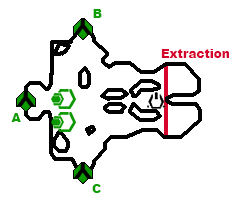
<style>
.page{position:relative;width:230px;height:200px;background:#ffffff}
.page>*{position:absolute;margin:0}
.t1{font:12px "Arial-Black";color:#0d9e01}
.t2{font:12px "Arial-Black";color:#d6052c}
</style>
<div class="page">
<p class="t1" style="left:93px;top:9px;width:9px;height:9px">B</p>
<p class="t2" style="left:161px;top:49px;width:68px;height:9px">Extraction</p>
<p class="t1" style="left:11px;top:113px;width:10px;height:9px">A</p>
<p class="t1" style="left:92px;top:184px;width:9px;height:9px">C</p>
</div>
